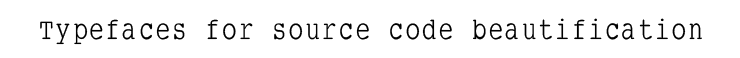
<style>
.page{position:relative;width:740px;height:58px;background:#ffffff}
.page>*{position:absolute;margin:0}
.t1{font:30px "SmallTypeWriting";color:#000000}
</style>
<div class="page">
<p class="t1" style="left:40px;top:18px;width:662px;height:27px">Typefaces for source code beautification</p>
</div>
